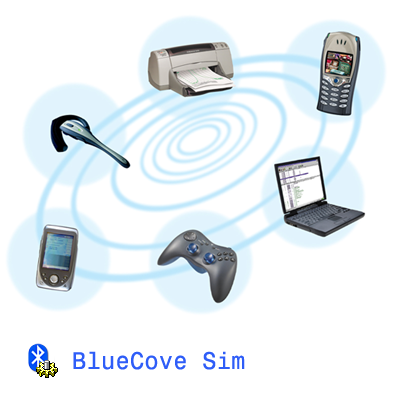
<style>
.page{position:relative;width:400px;height:400px;background:#ffffff}
.page>*{position:absolute;margin:0}
.t1{font:24px "HE_TERMINAL-Roman";color:#2e5df8}
</style>
<div class="page">
<p class="t1" style="left:73px;top:351px;width:172px;height:19px">BlueCove Sim</p>
</div>
